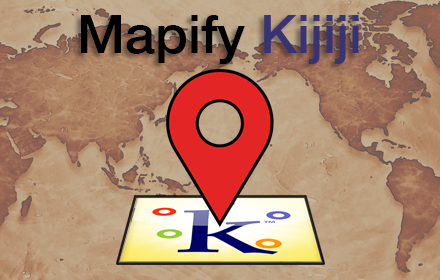
<style>
.page{position:relative;width:440px;height:280px}
.page>*{position:absolute;margin:0}
.t1{font:53.3px "HelveticaNeue-Medium";color:#000000}
.t2{font:53.3px "HelveticaNeue-Medium";color:#383474}
</style>
<div class="page">
<p class="t1" style="left:81px;top:15px;width:278px;height:49px">Mapify <span class="t2">Kijiji</span></p>
</div>
